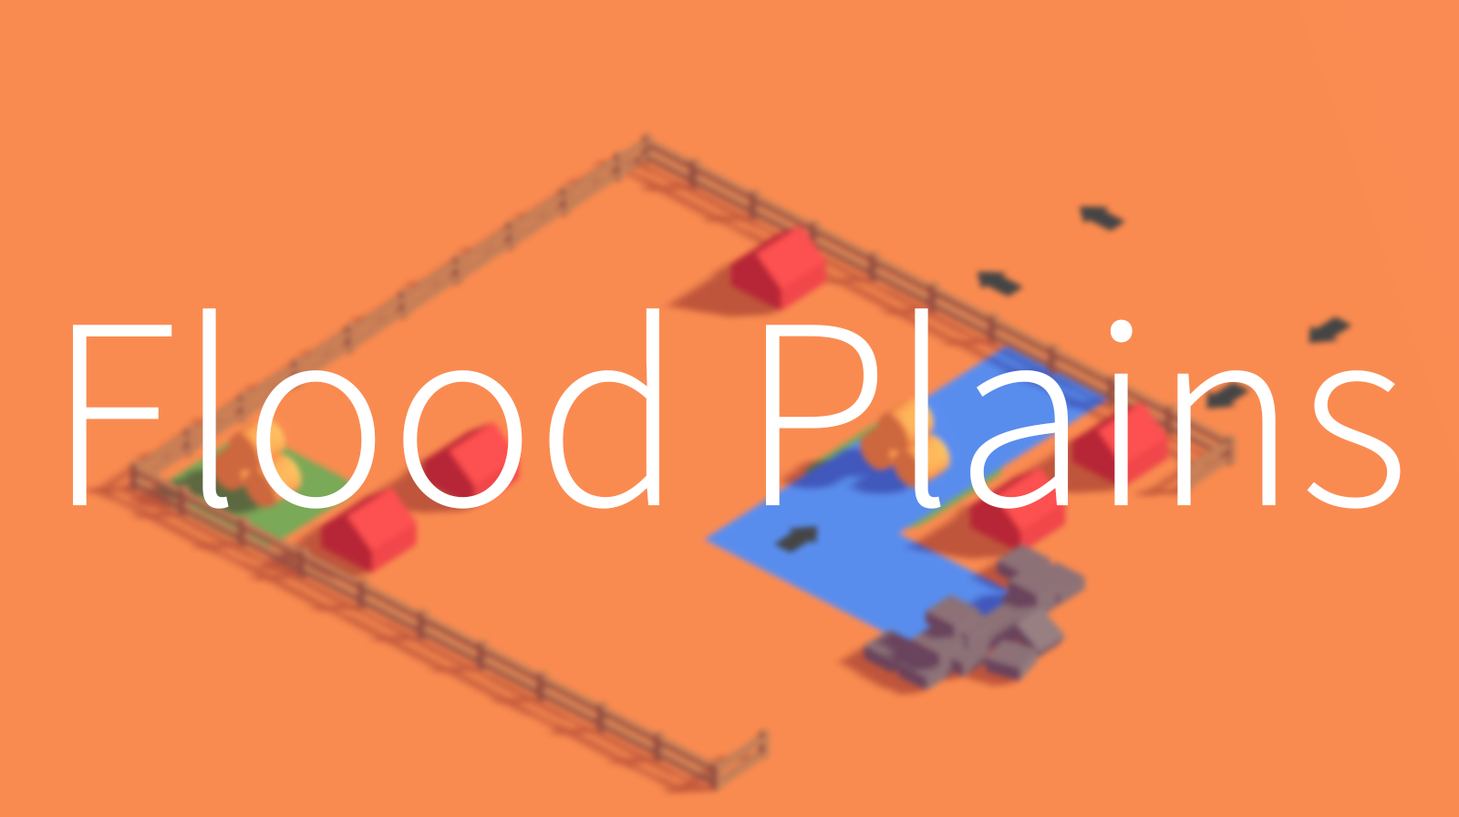
<style>
.page{position:relative;width:1459px;height:817px;background:#fa8b50}
.page>*{position:absolute;margin:0}
.t1{font:273.6px "SourceSansRoman_307.000wght";color:#ffffff}
</style>
<div class="page">
<p class="t1" style="left:73px;top:308px;width:1328px;height:201px">Flood Plains</p>
</div>
